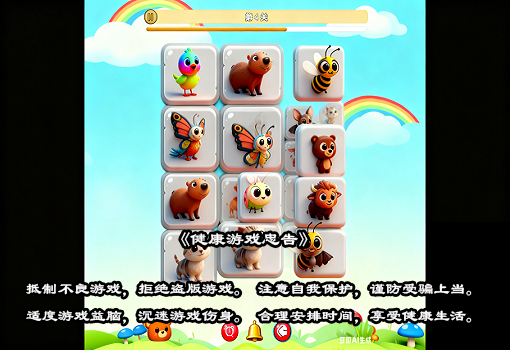
<style>
.page{position:relative;width:510px;height:350px}
.page>*{position:absolute;margin:0}
.t1{font:18px "LiSu";color:#ffffff}
.t2{font:16px "LiSu";color:#ffffff}
</style>
<div class="page">
<p class="t1" style="left:181px;top:232px;width:127px;height:15px">《健康游戏忠告》</p>
<p class="t2" style="left:26px;top:283px;width:446px;height:41px">抵制不良游戏，拒绝盗版游戏。 注意自我保护，谨防受骗上当。<br>适度游戏益脑，沉迷游戏伤身。 合理安排时间，享受健康生活。</p>
</div>
